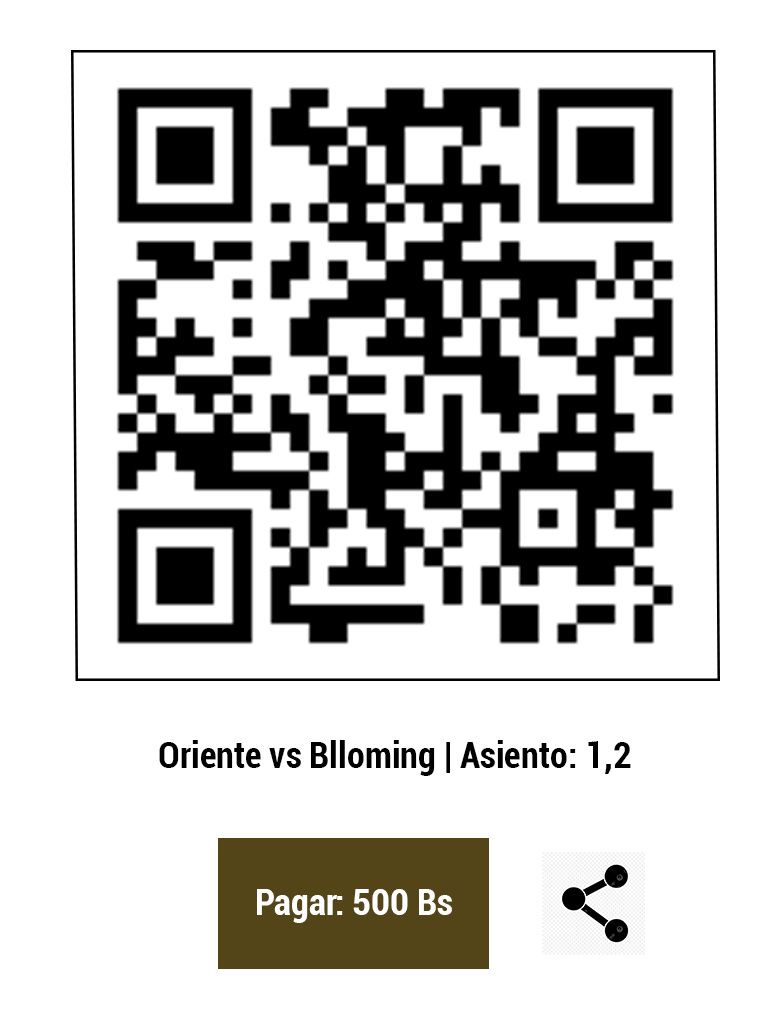
<style>
.page{position:relative;width:768px;height:1024px;background:#ffffff}
.page>*{position:absolute;margin:0}
.t1{font:36px "Roboto-BoldCondensed";color:#000000}
.t2{font:36px "Roboto-BoldCondensed";color:#ffffff}
</style>
<div class="page">
<p class="t1" style="left:159px;top:740px;width:472px;height:36px">Oriente vs Blloming | Asiento: 1,2</p>
<p class="t2" style="left:257px;top:889px;width:195px;height:34px">Pagar: 500 Bs</p>
</div>
